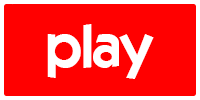
<style>
.page{position:relative;width:200px;height:100px;background:#ff0000}
.page>*{position:absolute;margin:0}
.t1{font:60px "ELEGANCE";color:#ffffff}
</style>
<div class="page">
<p class="t1" style="left:47px;top:24px;width:107px;height:55px">play</p>
</div>
